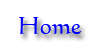
<style>
.page{position:relative;width:100px;height:50px;background:#ffffff}
.page>*{position:absolute;margin:0}
.t1{font:24px "Calligraphic421BT-RomanB";color:#0000ff}
</style>
<div class="page">
<p class="t1" style="left:19px;top:17px;width:63px;height:17px">Home</p>
</div>
